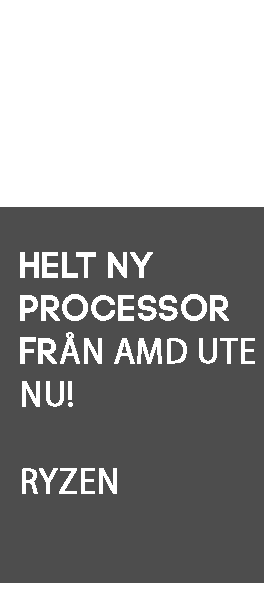
<style>
.page{position:relative;width:280px;height:600px;background:#4d4d4d}
.page>*{position:absolute;margin:0}
.t1{font:36px "MyriadPro-Regular";color:#ffffff;font-weight:bold;scale:0.96 1}
.t2{font:36px "FSPDEMO-CodeProRegular";color:#ffffff;font-weight:bold;scale:0.96 1}
</style>
<div class="page">
<p class="t1" style="left:20px;top:252px;width:235px;height:242px"><span class="t2">HELT NY<br>PROCESSOR<br>FR</span>ÅN AMD UTE<br>NU!<br><br>RYZEN</p>
</div>
